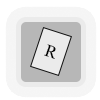
<style>
.page{position:relative;width:100px;height:100px;background:#f5f5f5}
.page>*{position:absolute;margin:0}
.t1{font:16.7px "Georgia";color:#030303}
</style>
<div class="page">
<p class="t1" style="left:44px;top:44px;width:12px;height:15px;rotate:19deg">R</p>
</div>
